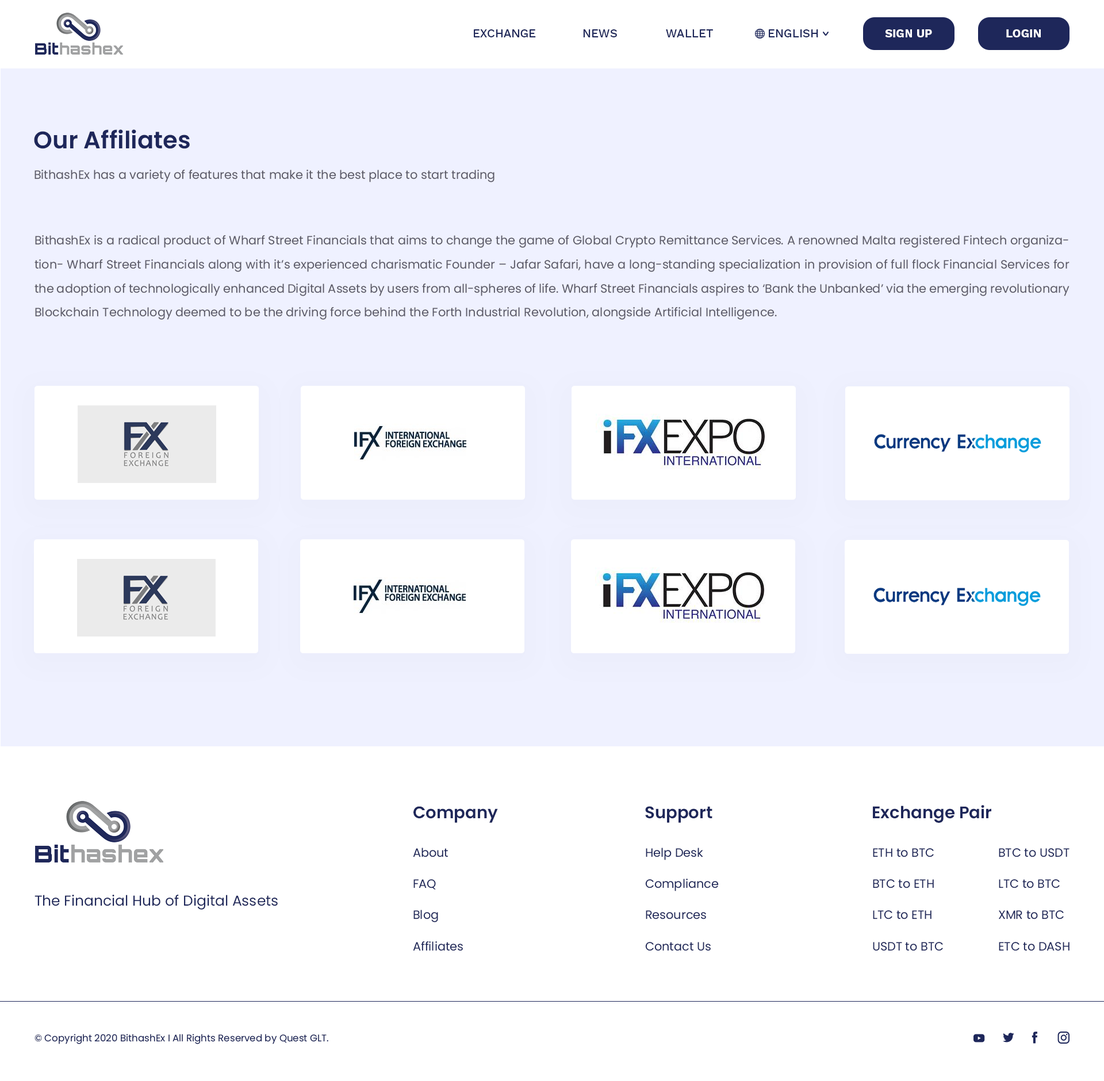
<style>
.page{position:relative;width:1104px;height:1081px;background:#ffffff}
.page>*{position:absolute;margin:0}
.t1{font:11.7px "WorkSans-Medium";color:#1e2759;text-transform:uppercase}
.t2{font:11.7px "WorkSans-Bold";color:#ffffff;text-transform:uppercase}
.t3{font:23.9px "Poppins-SemiBold";color:#1e275a}
.t4{font:12px "Poppins-Regular";color:#5c5b67}
.t5{font:12px/23.9px "Poppins-Regular";color:#5c5b67}
.t6{font:16.8px "Poppins-SemiBold";color:#1e275a}
.t7{font:12px/31.1px "Poppins-Regular";color:#1e275a}
.t8{font:14.4px "Poppins-Regular";color:#1e275a}
.t9{font:9.6px "Poppins-Regular";color:#1e275a}
</style>
<div class="page">
<p class="t1" style="left:474px;top:29px;width:62px;height:8px">exchange</p>
<p class="t1" style="left:583px;top:29px;width:34px;height:8px">news</p>
<p class="t1" style="left:666px;top:29px;width:47px;height:8px">wallet</p>
<p class="t1" style="left:768px;top:29px;width:50px;height:8px">english</p>
<p class="t2" style="left:885px;top:29px;width:47px;height:8px">sign up</p>
<p class="t2" style="left:1006px;top:29px;width:34px;height:8px">login</p>
<p class="t3" style="left:34px;top:129px;width:156px;height:20px">Our Affiliates</p>
<p class="t4" style="left:34px;top:170px;width:460px;height:12px">BithashEx has a variety of features that make it the best place to start trading</p>
<p class="t5" style="left:34px;top:235px;width:1035px;height:85px;text-align:justify">BithashEx is a radical product of Wharf Street Financials that aims to change the game of Global Crypto Remittance Services. A renowned Malta registered Fintech organization- Wharf Street Financials along with it’s experienced charismatic Founder – Jafar Safari, have a long-standing specialization in provision of full flock Financial Services for the adoption of technologically enhanced Digital Assets by users from all-spheres of life. Wharf Street Financials aspires to ‘Bank the Unbanked’ via the emerging revolutionary Blockchain Technology deemed to be the driving force behind the Forth Industrial Revolution, alongside Artificial Intelligence.</p>
<p class="t6" style="left:413px;top:806px;width:85px;height:16px">Company</p>
<p class="t6" style="left:645px;top:806px;width:67px;height:16px">Support</p>
<p class="t6" style="left:872px;top:805px;width:119px;height:17px">Exchange Pair</p>
<p class="t7" style="left:413px;top:847px;width:50px;height:104px">About<br>FAQ<br>Blog<br>Affiliates</p>
<p class="t7" style="left:645px;top:847px;width:73px;height:104px">Help Desk<br>Compliance<br>Resources<br>Contact Us</p>
<p class="t7" style="left:872px;top:848px;width:71px;height:103px">ETH to BTC<br>BTC to ETH<br>LTC to ETH<br>USDT to BTC</p>
<p class="t7" style="left:998px;top:848px;width:71px;height:103px">BTC to USDT<br>LTC to BTC<br>XMR to BTC<br>ETC to DASH</p>
<p class="t8" style="left:34px;top:894px;width:244px;height:15px">The Financial Hub of Digital Assets</p>
<p class="t9" style="left:34px;top:1033px;width:294px;height:11px">© Copyright 2020 BithashEx I All Rights Reserved by Quest GLT.</p>
</div>
